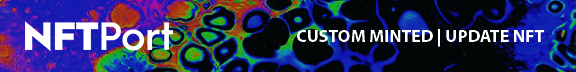
<style>
.page{position:relative;width:576px;height:72px}
.page>*{position:absolute;margin:0}
.t1{font:17.8px "MyriadPro-Bold";color:#ffffff}
</style>
<div class="page">
<p class="t1" style="left:297px;top:29px;width:247px;height:18px">CUSTOM MINTED | UPDATE NFT</p>
</div>
